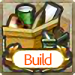
<style>
.page{position:relative;width:75px;height:75px}
.page>*{position:absolute;margin:0}
.t1{font:16px "AdobeClean-Regular";letter-spacing:-0.08em;color:#ff5a00}
</style>
<div class="page">
<p class="t1" style="left:24px;top:53px;width:28px;height:13px">Build</p>
</div>
